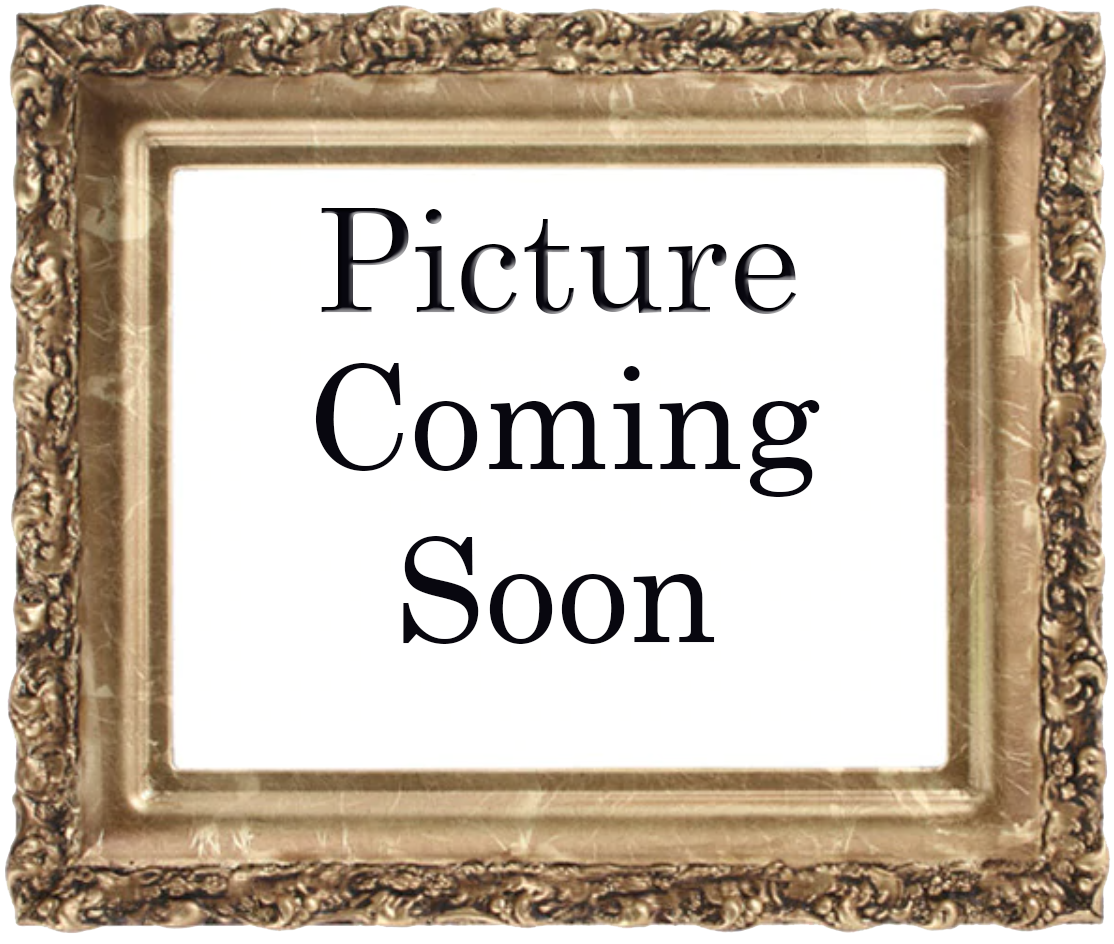
<style>
.page{position:relative;width:1114px;height:944px;background:#ffffff}
.page>*{position:absolute;margin:0}
.t1{font:144px "Century";color:#08070f}
</style>
<div class="page">
<p class="t1" style="left:321px;top:208px;width:476px;height:106px">Picture</p>
<p class="t1" style="left:315px;top:363px;width:505px;height:134px">Coming</p>
<p class="t1" style="left:403px;top:536px;width:312px;height:108px">Soon</p>
</div>
